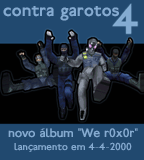
<style>
.page{position:relative;width:144px;height:160px;background:#21496f}
.page>*{position:absolute;margin:0}
.t1{font:18.7px "Railway-Semibold";letter-spacing:0.005em;color:#85abd1}
.t2{font:13.3px/13.3px "Railway-Semibold";color:#85abd1}
.t3{font:10.7px/13.3px "Railway-Semibold";letter-spacing:0.01em;color:#85abd1}
.t4{font:10.7px/13.3px "Railway";letter-spacing:0.01em;color:#85abd1}
.t5{font:10.7px/13.3px "Sylfaen";letter-spacing:0.01em;color:#85abd1}
</style>
<div class="page">
<p class="t1" style="left:3px;top:6px;width:116px;height:15px">contra garotos</p>
<p class="t2" style="left:8px;top:128px;width:130px;height:24px;text-align:center">novo álbum "We r0x0r"<br><span class="t3">lan</span><span class="t4">ç</span><span class="t3">amento em 4</span><span class="t5">-</span><span class="t3">4</span><span class="t5">-</span><span class="t3">2000</span></p>
</div>
